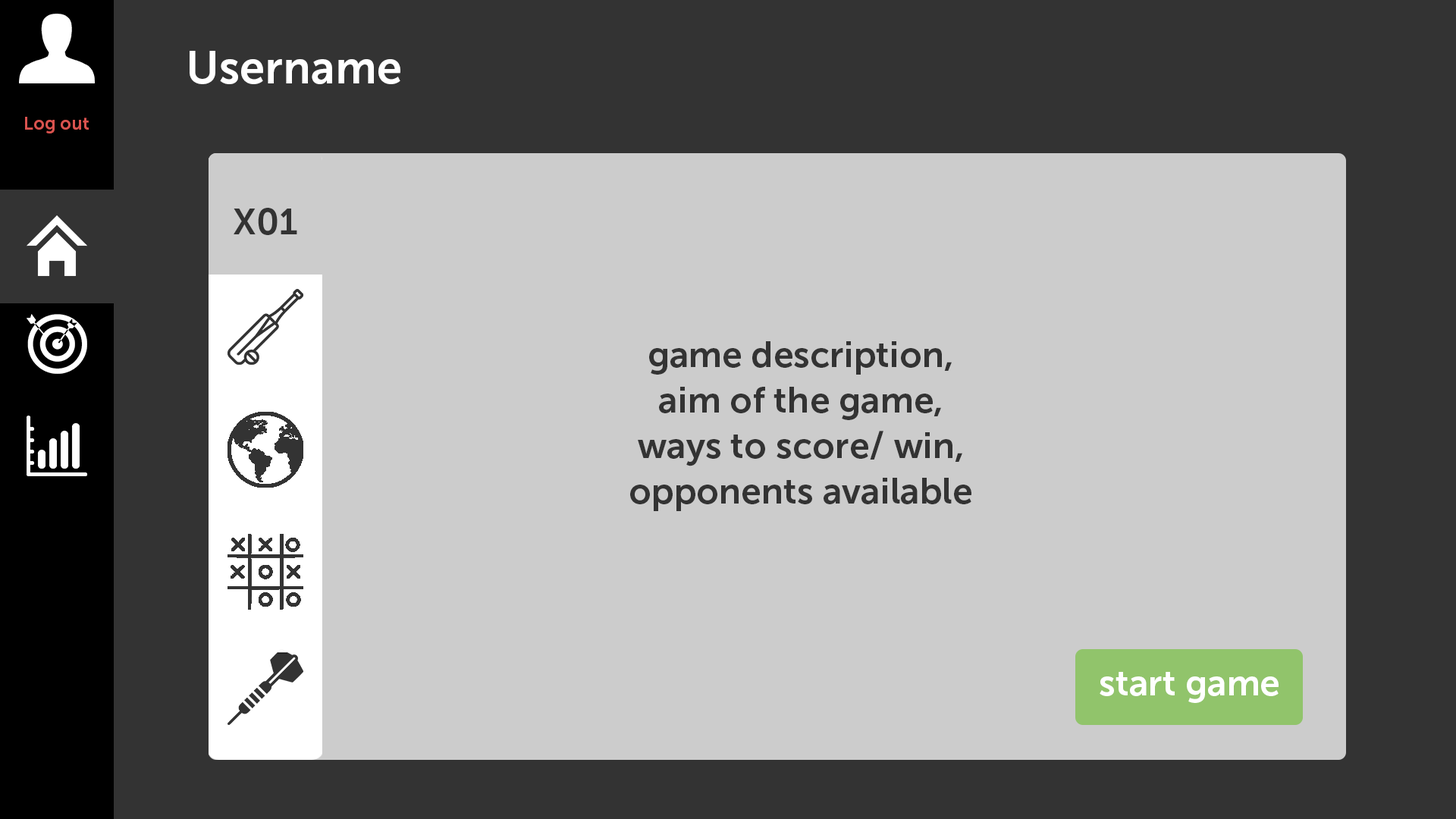
<style>
.page{position:relative;width:1456px;height:819px;background:#cccccc}
.page>*{position:absolute;margin:0}
.t1{font:45.5px "MuseoSans-700";color:#ffffff}
.t2{font:18.2px "MuseoSans-700";color:#d9534f}
.t3{font:36.4px "MuseoSans-700";color:#333333}
.t4{font:36.4px/45.5px "MuseoSans-700";color:#333333}
.t5{font:36.4px "MuseoSans-700";color:#ffffff}
</style>
<div class="page">
<p class="t1" style="left:190px;top:51px;width:210px;height:33px">Username</p>
<p class="t2" style="left:25px;top:117px;width:64px;height:16px">Log out</p>
<p class="t3" style="left:234px;top:208px;width:63px;height:27px">X01</p>
<p class="t3" style="left:234px;top:208px;width:63px;height:27px">X01</p>
<p class="t4" style="left:630px;top:341px;width:341px;height:170px;text-align:center">game description,<br>aim of the game,<br>ways to score/ win,<br>opponents available</p>
<p class="t5" style="left:1100px;top:672px;width:179px;height:31px">start game</p>
</div>
